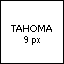
<style>
.page{position:relative;width:64px;height:64px;background:#ffffff}
.page>*{position:absolute;margin:0}
.t1{font:9px "Tahoma";color:#000000}
</style>
<div class="page">
<p class="t1" style="left:11px;top:25px;width:41px;height:20px;text-align:center">TAHOMA<br>9 px</p>
</div>
